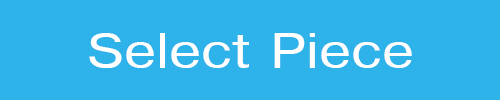
<style>
.page{position:relative;width:500px;height:100px;background:#2db2ea}
.page>*{position:absolute;margin:0}
.t1{font:48px "Helvetica";color:#ffffff;scale:1.2 1}
</style>
<div class="page">
<p class="t1" style="left:89px;top:33px;width:323px;height:35px">Select Piece</p>
</div>
